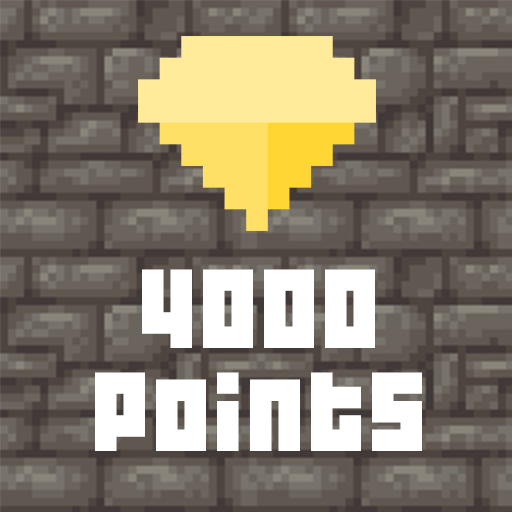
<style>
.page{position:relative;width:512px;height:512px}
.page>*{position:absolute;margin:0}
.t1{font:100px/103px "04b19";letter-spacing:0.04em;color:#ffffff}
</style>
<div class="page">
<p class="t1" style="left:95px;top:269px;width:327px;height:182px;text-align:center">4000<br>Points</p>
</div>
